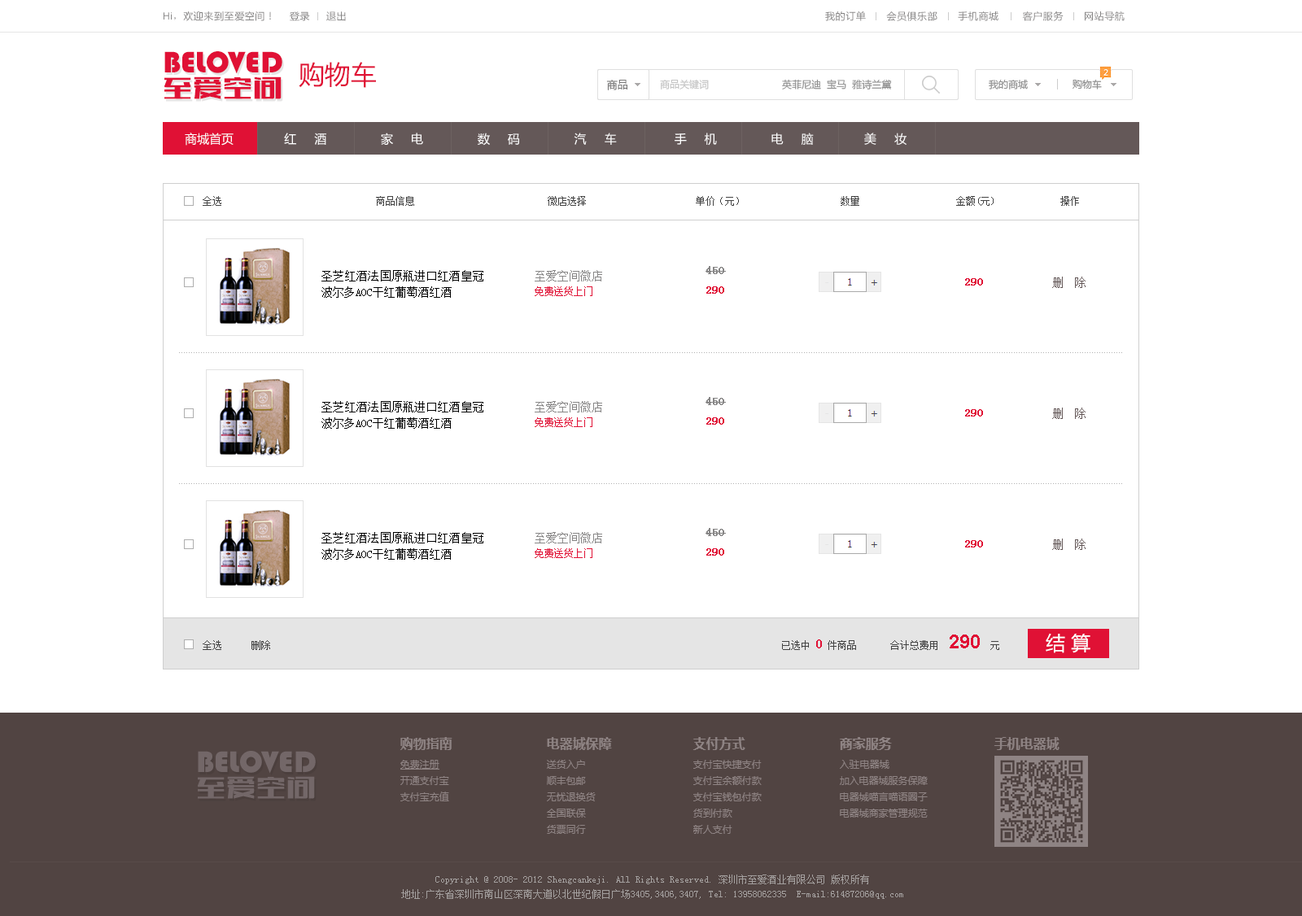
<style>
.page{position:relative;width:1302px;height:916px;background:#ffffff}
.page>*{position:absolute;margin:0}
.t1{font:9.8px "MicrosoftYaHei";letter-spacing:0.05em;color:#858484}
.t2{font:9.8px "ArialMT";letter-spacing:0.05em;color:#858484}
.t3{font:9.8px "SimSun";letter-spacing:0.05em;color:#858484}
.t4{font:30.9px "Bauhaus93";color:#e01135}
.t5{font:26px "MicrosoftYaHei";color:#e01135}
.t6{font:29.3px "FZCTHJW--GB1-0";letter-spacing:0.025em;color:#e01135}
.t7{font:10.6px "MicrosoftYaHei";color:#7a7979}
.t8{font:9.8px "MicrosoftYaHei";color:#c4c4c4}
.t9{font:9.8px "MicrosoftYaHei";color:#8e8e8e}
.t10{font:12.2px "MicrosoftYaHei";color:#ffffff}
.t11{font:9.8px "SimSun";color:#444444}
.t12{font:11.4px/19.5px "SimSun";color:#878686;font-weight:bold}
.t13{font:11.4px/19.5px "SimSun";color:#e01135;font-weight:bold}
.t14{font:11.4px/16.3px "SimSun";color:#000000}
.t15{font:11.4px/16.3px "SimSun";color:#878686}
.t16{font:9.8px/16.3px "SimSun";color:#e01135}
.t17{font:11.4px "SimSun";color:#e01135;font-weight:bold}
.t18{font:11.4px "SimSun";color:#645858}
.t19{font:13px "SimSun";color:#e01135;font-weight:bold}
.t20{font:19.5px "Arial-BoldMT";color:#e01135}
.t21{font:19.5px "MicrosoftYaHei";color:#ffffff}
.t22{font:9.8px/14.6px "SimSun";color:#a4a09f}
</style>
<div class="page">
<p class="t1" style="left:164px;top:11px;width:107px;height:10px"><span class="t2">Hi</span><span class="t3">，</span>欢迎来到至爱空间！</p>
<p class="t1" style="left:290px;top:11px;width:20px;height:10px">登录</p>
<p class="t1" style="left:326px;top:11px;width:20px;height:10px">退出</p>
<p class="t1" style="left:825px;top:11px;width:299px;height:10px">我的订单      会员俱乐部      手机商城       客户服务      网站导航</p>
<p class="t4" style="left:164px;top:51px;width:118px;height:23px">BELOVED</p>
<p class="t5" style="left:299px;top:62px;width:77px;height:26px">购物车</p>
<p class="t6" style="left:164px;top:76px;width:117px;height:23px">至爱空间</p>
<p class="t7" style="left:606px;top:80px;width:21px;height:10px">商品</p>
<p class="t8" style="left:660px;top:79px;width:49px;height:10px">商品关键词</p>
<p class="t9" style="left:782px;top:79px;width:110px;height:10px">英菲尼迪  宝马  雅诗兰黛</p>
<p class="t9" style="left:988px;top:79px;width:40px;height:10px">我的商城</p>
<p class="t9" style="left:1072px;top:79px;width:30px;height:10px">购物车</p>
<p class="t10" style="left:185px;top:133px;width:721px;height:13px">商城首页              红     酒               家     电               数     码               汽     车                手     机               电     脑              美     妆</p>
<p class="t11" style="left:203px;top:196px;width:18px;height:10px">全选</p>
<p class="t11" style="left:376px;top:196px;width:38px;height:10px">商品信息</p>
<p class="t11" style="left:548px;top:196px;width:38px;height:10px">微店选择</p>
<p class="t11" style="left:696px;top:196px;width:43px;height:10px">单价（元）</p>
<p class="t11" style="left:840px;top:196px;width:19px;height:10px">数量</p>
<p class="t11" style="left:956px;top:196px;width:37px;height:10px">金额(元)</p>
<p class="t11" style="left:1060px;top:196px;width:19px;height:10px">操作</p>
<p class="t12" style="left:705px;top:266px;width:21px;height:28px;text-align:justify">450<br><span class="t13">290</span></p>
<p class="t14" style="left:321px;top:270px;width:162px;height:28px;text-align:justify">圣芝红酒法国原瓶进口红酒皇冠波尔多AOC干红葡萄酒红酒</p>
<p class="t15" style="left:535px;top:270px;width:67px;height:26px;text-align:justify">至爱空间微店<br><span class="t16">免费送货上门</span></p>
<p class="t17" style="left:965px;top:278px;width:18px;height:8px">290</p>
<p class="t18" style="left:1052px;top:277px;width:33px;height:11px">删  除</p>
<p class="t14" style="left:321px;top:401px;width:162px;height:28px;text-align:justify">圣芝红酒法国原瓶进口红酒皇冠波尔多AOC干红葡萄酒红酒</p>
<p class="t15" style="left:535px;top:401px;width:67px;height:26px;text-align:justify">至爱空间微店<br><span class="t16">免费送货上门</span></p>
<p class="t12" style="left:705px;top:397px;width:21px;height:28px;text-align:justify">450<br><span class="t13">290</span></p>
<p class="t17" style="left:965px;top:409px;width:18px;height:8px">290</p>
<p class="t18" style="left:1052px;top:408px;width:33px;height:11px">删  除</p>
<p class="t14" style="left:321px;top:532px;width:162px;height:28px;text-align:justify">圣芝红酒法国原瓶进口红酒皇冠波尔多AOC干红葡萄酒红酒</p>
<p class="t15" style="left:535px;top:532px;width:67px;height:26px;text-align:justify">至爱空间微店<br><span class="t16">免费送货上门</span></p>
<p class="t12" style="left:705px;top:528px;width:21px;height:28px;text-align:justify">450<br><span class="t13">290</span></p>
<p class="t17" style="left:965px;top:540px;width:18px;height:8px">290</p>
<p class="t18" style="left:1052px;top:539px;width:33px;height:11px">删  除</p>
<p class="t11" style="left:203px;top:640px;width:18px;height:10px">全选</p>
<p class="t11" style="left:251px;top:640px;width:19px;height:10px">删除</p>
<p class="t11" style="left:782px;top:639px;width:74px;height:11px">已选中 <span class="t19">0</span> 件商品</p>
<p class="t11" style="left:890px;top:635px;width:109px;height:15px">合计总费用  <span class="t20">290</span>  元</p>
<p class="t21" style="left:1045px;top:633px;width:45px;height:20px">结 算</p>
<p class="t22" style="left:401px;top:875px;width:502px;height:24px;text-align:center">Copyright @ 2008- 2012 Shengcankeji. All Rights Reserved. 深圳市至爱酒业有限公司 版权所有<br>地址:广东省深圳市南山区深南大道以北世纪假日广场3405,3406,3407, Tel: 13958062335  E-mail:61487206@qq.com</p>
</div>
